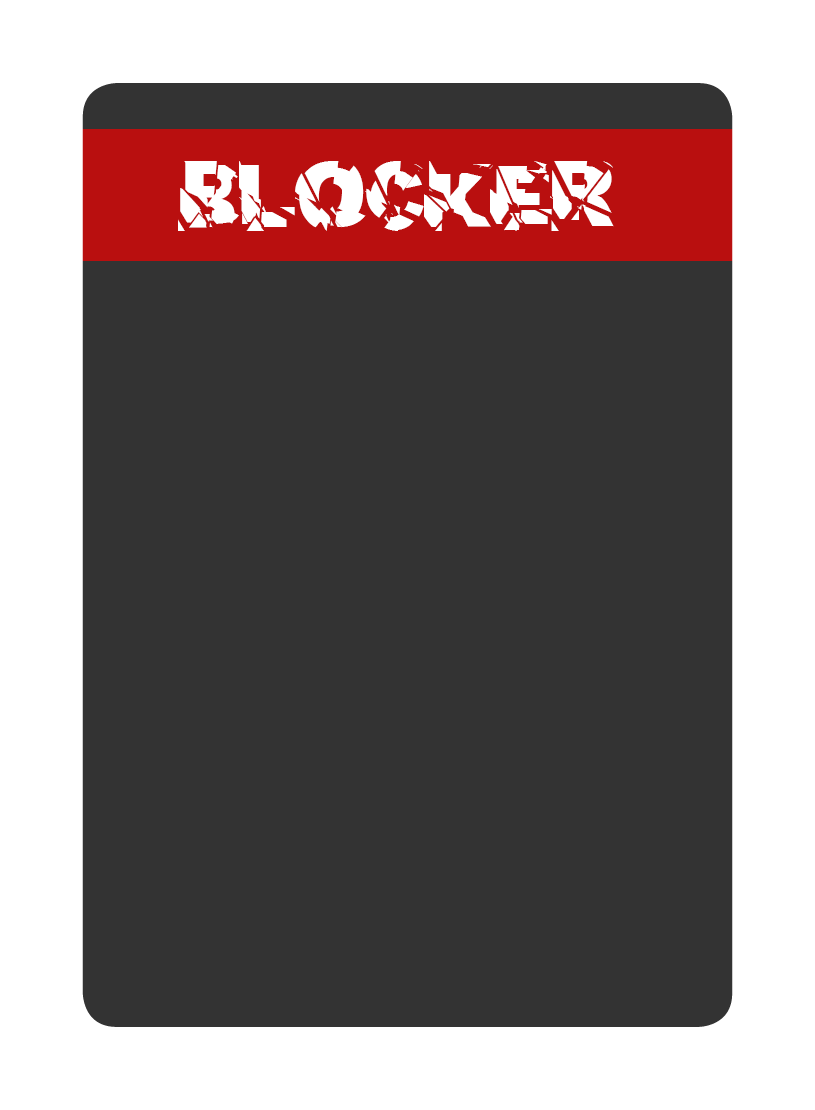
<style>
.page{position:relative;width:815px;height:1110px;background:#333333}
.page>*{position:absolute;margin:0}
.t1{font:100px "aerial-demented";color:#ffffff}
</style>
<div class="page">
<p class="t1" style="left:178px;top:161px;width:436px;height:70px">Blocker</p>
</div>
